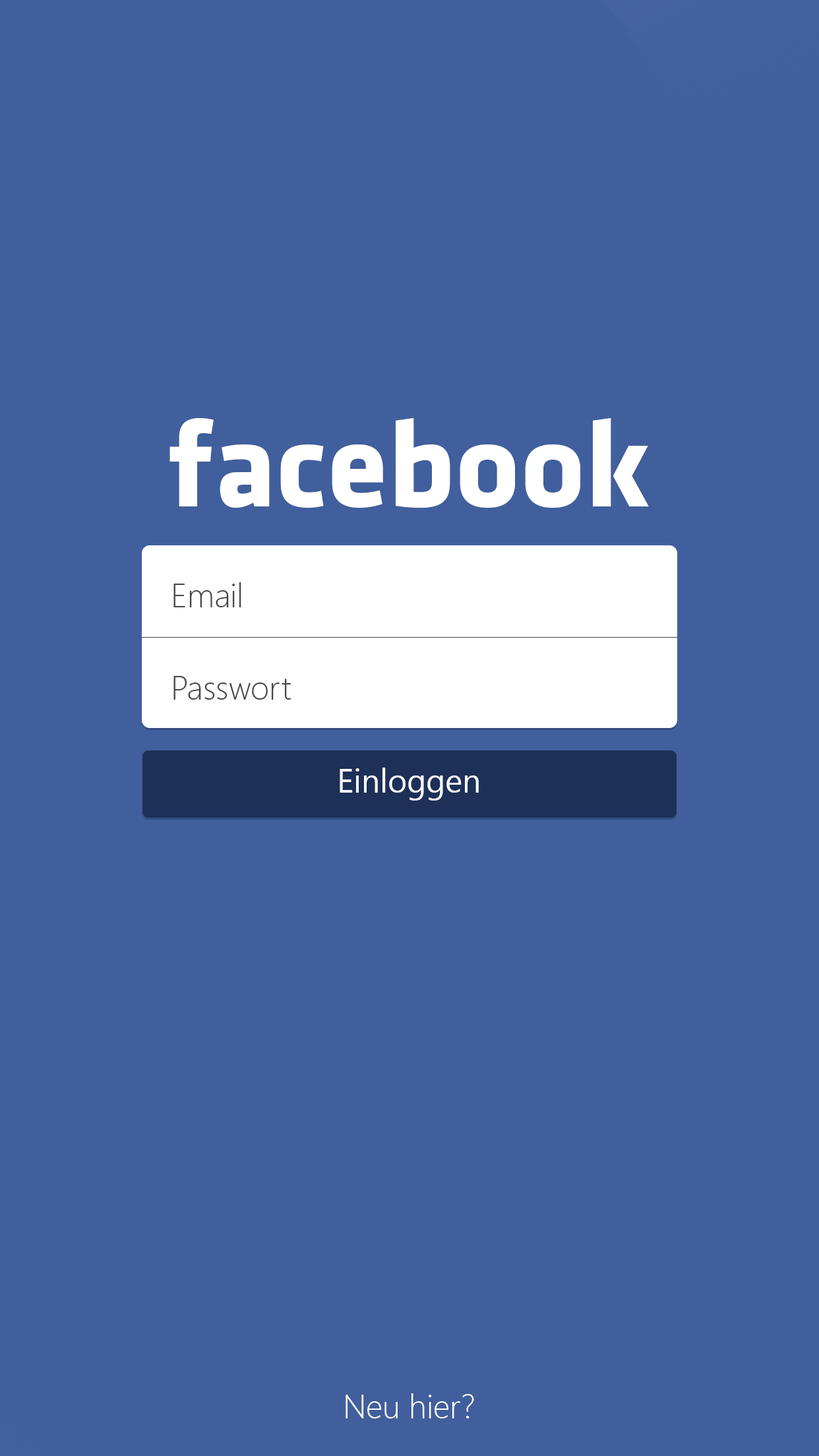
<style>
.page{position:relative;width:819px;height:1456px;background:#415f9d}
.page>*{position:absolute;margin:0}
.t1{font:125.1px "KlavikaBold-BoldOSF";color:#ffffff}
.t2{font:32.8px "SegoeUI-Light";color:#464646}
.t3{font:32.8px "SegoeUI";color:#ffffff}
.t4{font:32.8px "SegoeUI-Light";color:#ffffff}
</style>
<div class="page">
<p class="t1" style="left:169px;top:418px;width:480px;height:90px">facebook</p>
<p class="t2" style="left:173px;top:582px;width:68px;height:25px">Email</p>
<p class="t2" style="left:173px;top:676px;width:118px;height:24px">Passwort</p>
<p class="t3" style="left:340px;top:768px;width:139px;height:33px">Einloggen</p>
<p class="t4" style="left:346px;top:1393px;width:128px;height:25px">Neu hier?</p>
</div>
